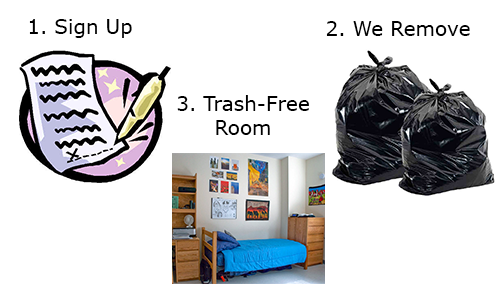
<style>
.page{position:relative;width:500px;height:300px;background:#ffffff}
.page>*{position:absolute;margin:0}
.t1{font:20px "Verdana";color:#000000}
.t2{font:24px "MyriadPro-Regular";color:#000000}
</style>
<div class="page">
<p class="t1" style="left:29px;top:19px;width:103px;height:19px">1. Sign Up</p>
<p class="t1" style="left:326px;top:21px;width:144px;height:15px">2. We Remove <span class="t2">Trash</span></p>
<p class="t1" style="left:177px;top:95px;width:132px;height:40px;text-align:center">3. Trash-Free <br>Room</p>
</div>
